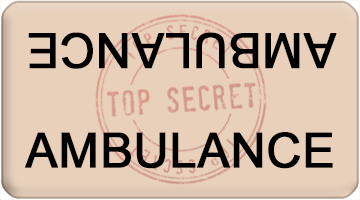
<style>
.page{position:relative;width:360px;height:200px;background:#e8d0bb}
.page>*{position:absolute;margin:0}
.t1{font:48px "ArialMT";color:#000000;font-weight:bold}
</style>
<div class="page">
<p class="t1" style="left:28px;top:32px;width:309px;height:37px;rotate:180deg">AMBULANCE</p>
<p class="t1" style="left:25px;top:132px;width:308px;height:37px">AMBULANCE</p>
</div>
